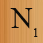
<style>
.page{position:relative;width:43px;height:43px}
.page>*{position:absolute;margin:0}
.t1{font:30px "TimesNewRomanPSMT";color:#0c0c0b}
.t2{font:12px "TimesNewRomanPSMT";color:#0c0c0b}
</style>
<div class="page">
<p class="t1" style="left:10px;top:8px;width:23px;height:21px">N</p>
<p class="t2" style="left:34px;top:28px;width:4px;height:9px">1</p>
</div>
